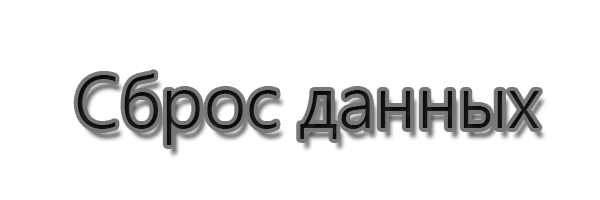
<style>
.page{position:relative;width:600px;height:200px;background:#ffffff}
.page>*{position:absolute;margin:0}
.t1{font:72px "MalgunGothic-Semilight";color:#101010}
</style>
<div class="page">
<p class="t1" style="left:77px;top:73px;width:462px;height:72px">Сброс данных</p>
</div>
